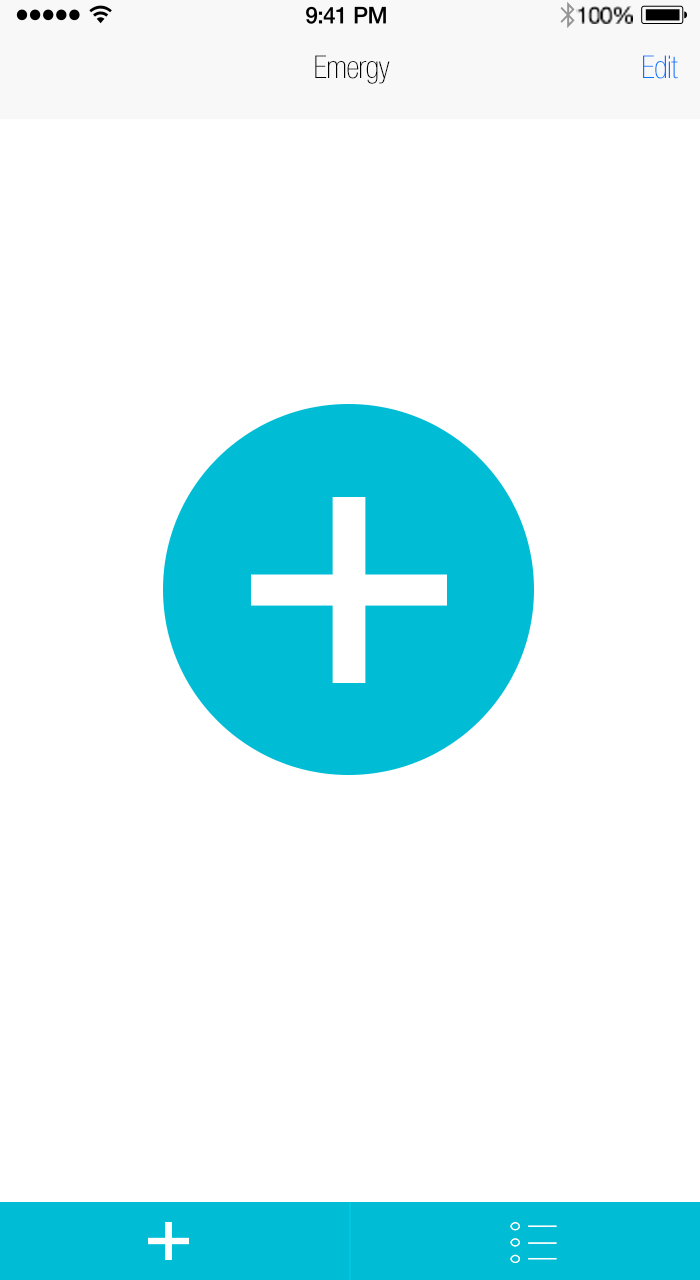
<style>
.page{position:relative;width:700px;height:1280px;background:#ffffff}
.page>*{position:absolute;margin:0}
.t1{font:23.1px "HelveticaNeue";letter-spacing:-0.02em;color:#000000}
.t2{font:31.6px "HelveticaNeue-ThinCond";letter-spacing:-0.02em;color:#000000}
.t3{font:31.6px "HelveticaNeue-ThinCond";letter-spacing:-0.02em;color:#0079ff}
</style>
<div class="page">
<p class="t1" style="left:576px;top:6px;width:57px;height:18px">100%</p>
<p class="t2" style="left:315px;top:55px;width:75px;height:29px">Emergy</p>
<p class="t3" style="left:643px;top:55px;width:35px;height:24px">Edit</p>
</div>
